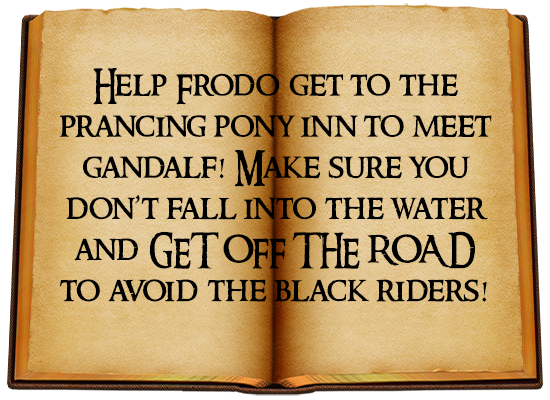
<style>
.page{position:relative;width:550px;height:400px}
.page>*{position:absolute;margin:0}
.t1{font:34.3px "RingbearerMedium";color:#000000}
</style>
<div class="page">
<p class="t1" style="left:59px;top:68px;width:433px;height:234px;text-align:center">Help Frodo get to the<br>prancing pony inn to meet<br>gandalf! Make sure you<br>don’t fall into the water<br>and GET OFF THE ROAD<br>to avoid the black riders!</p>
</div>
